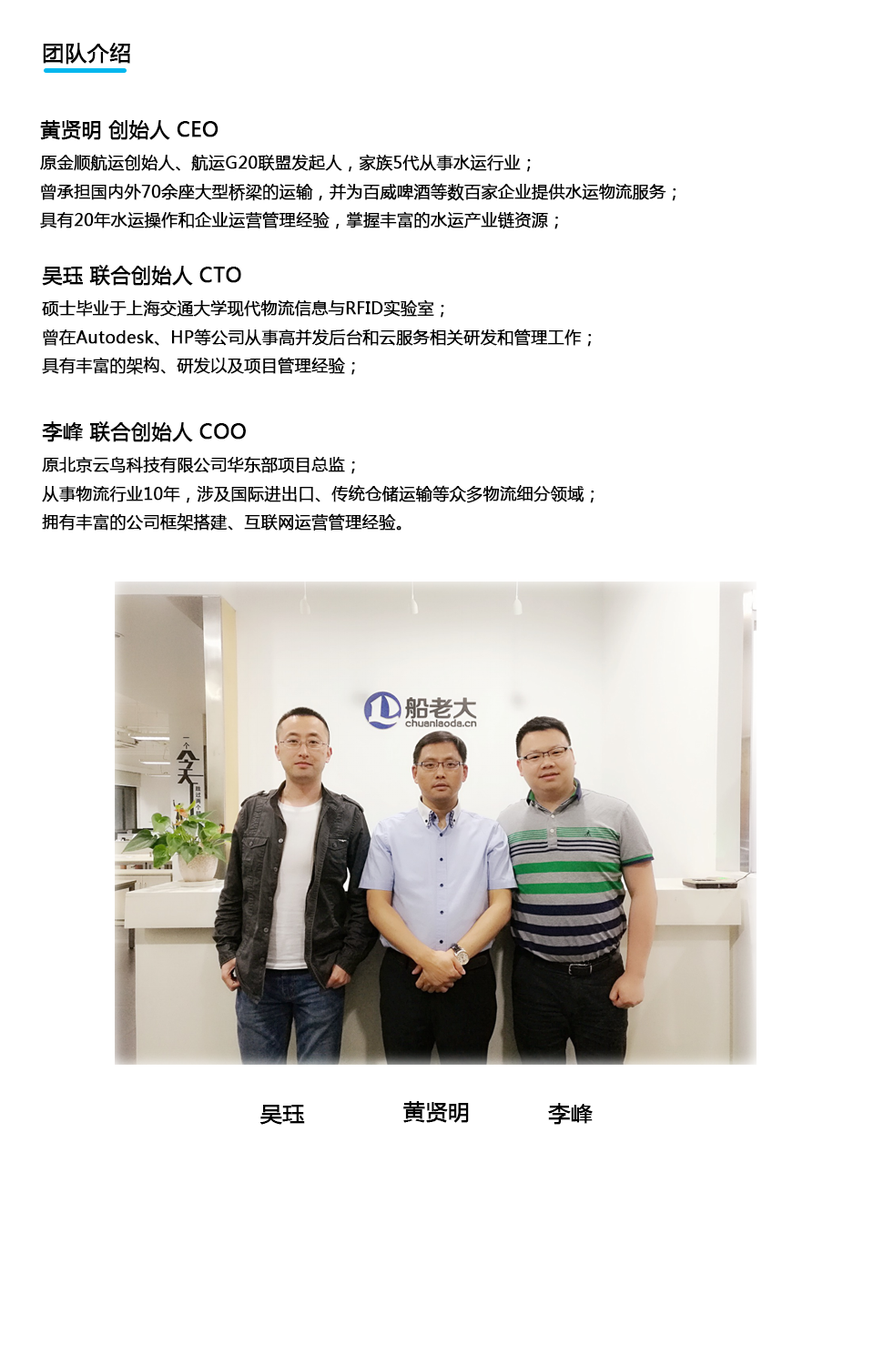
<style>
.page{position:relative;width:874px;height:1365px;background:#ffffff}
.page>*{position:absolute;margin:0}
.t1{font:21.8px "MicrosoftYaHei";color:#020202;font-weight:bold}
.t2{font:16.4px "MicrosoftYaHei";color:#020202;font-weight:bold}
.t3{font:20px "MicrosoftYaHei";color:#020202;font-weight:bold}
</style>
<div class="page">
<p class="t1" style="left:43px;top:43px;width:87px;height:22px">团队介绍</p>
<p class="t2" style="left:40px;top:120px;width:636px;height:109px"><span class="t3">黄贤明 创始人 CEO<br></span>原金顺航运创始人、航运G20联盟发起人，家族5代从事水运行业；<br>曾承担国内外70余座大型桥梁的运输，并为百威啤酒等数百家企业提供水运物流服务；<br>具有20年水运操作和企业运营管理经验，掌握丰富的水运产业链资源；</p>
<p class="t2" style="left:42px;top:265px;width:549px;height:110px"><span class="t3">吴珏 联合创始人 CTO<br></span>硕士毕业于上海交通大学现代物流信息与RFID实验室；<br>曾在Autodesk、HP等公司从事高并发后台和云服务相关研发和管理工作；<br>具有丰富的架构、研发以及项目管理经验；</p>
<p class="t2" style="left:42px;top:421px;width:552px;height:110px"><span class="t3">李峰 联合创始人 COO<br></span>原北京云鸟科技有限公司华东部项目总监；<br>从事物流行业10年，涉及国际进出口、传统仓储运输等众多物流细分领域；<br>拥有丰富的公司框架搭建、互联网运营管理经验。</p>
<p class="t1" style="left:260px;top:1105px;width:45px;height:20px">吴珏</p>
<p class="t1" style="left:403px;top:1101px;width:66px;height:22px">黄贤明</p>
<p class="t1" style="left:548px;top:1103px;width:44px;height:22px">李峰</p>
</div>
